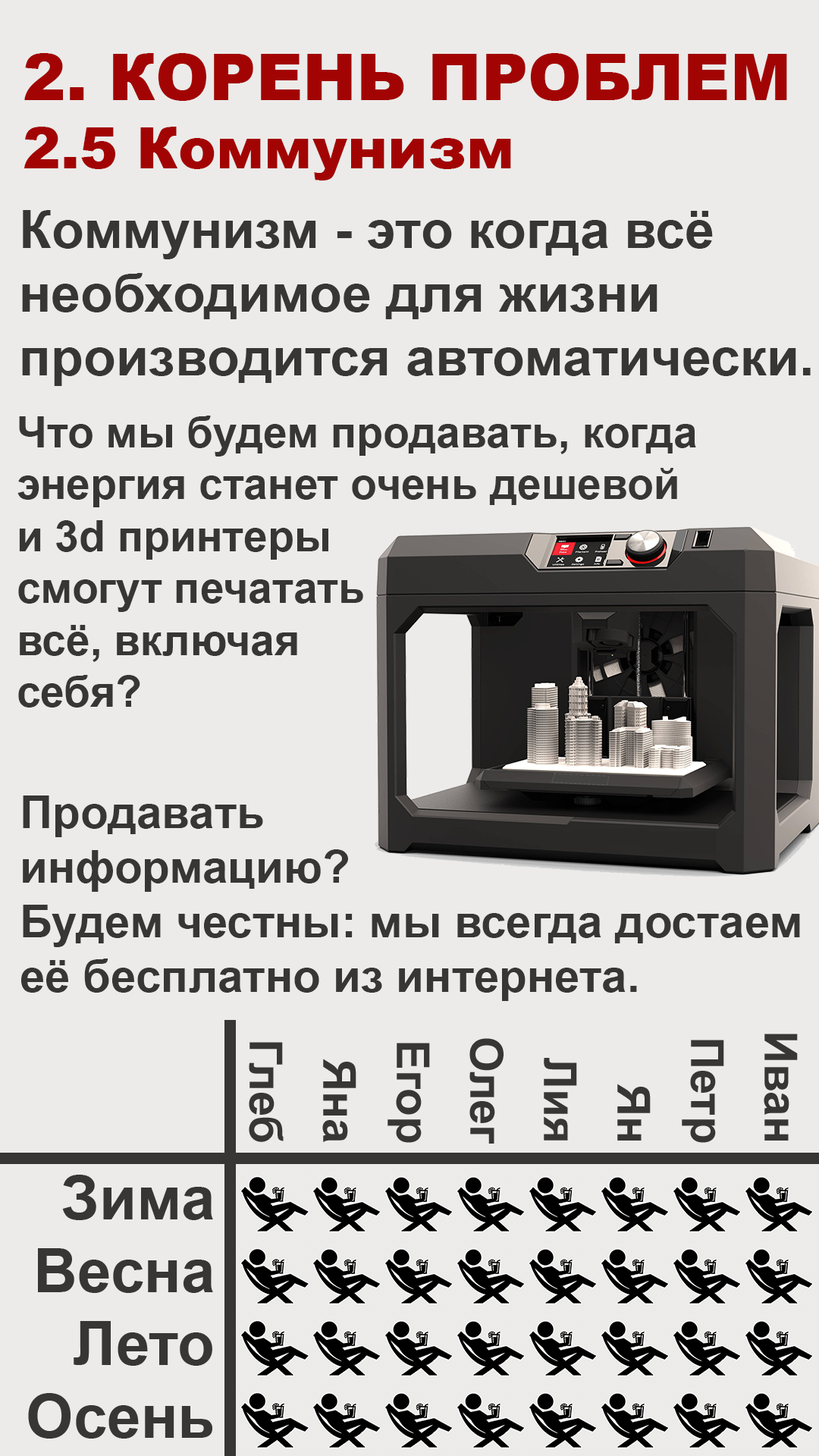
<style>
.page{position:relative;width:819px;height:1456px;background:#ecebe9}
.page>*{position:absolute;margin:0}
.t1{font:64.5px "Arial-Black";color:#a20403}
.t2{font:56.9px "Arial-Black";color:#a20403}
.t3{font:53.1px "Arial-BoldMT";color:#373634}
.t4{font:43.2px "Arial-BoldMT";color:#373634}
.t5{font:45.5px "Arial-BoldMT";color:#373634}
</style>
<div class="page">
<p class="t1" style="left:24px;top:53px;width:763px;height:127px">2. КОРЕНЬ ПРОБЛЕМ<br><span class="t2">2.5 Коммунизм</span></p>
<p class="t3" style="left:22px;top:210px;width:789px;height:176px">Коммунизм - это когда всё <br>необходимое для жизни <br>производится автоматически.</p>
<p class="t4" style="left:17px;top:416px;width:679px;height:292px">Что мы будем продавать, когда <br>энергия станет очень дешевой<br>и 3d принтеры<br>смогут печатать<br>всё, включая<br>себя?</p>
<p class="t5" style="left:21px;top:795px;width:779px;height:206px">Продавать<br>информацию?<br>Будем честны: мы всегда достаем <br>её бесплатно из интернета.</p>
</div>
